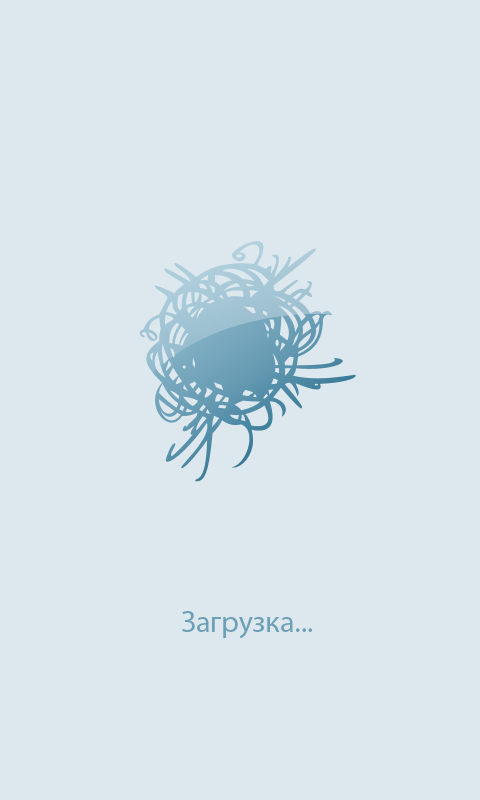
<style>
.page{position:relative;width:480px;height:800px;background:#dce8ee}
.page>*{position:absolute;margin:0}
.t1{font:30px "MyriadPro-Regular";color:#6da0b7}
</style>
<div class="page">
<p class="t1" style="left:182px;top:611px;width:130px;height:28px">Загрузка...</p>
</div>
